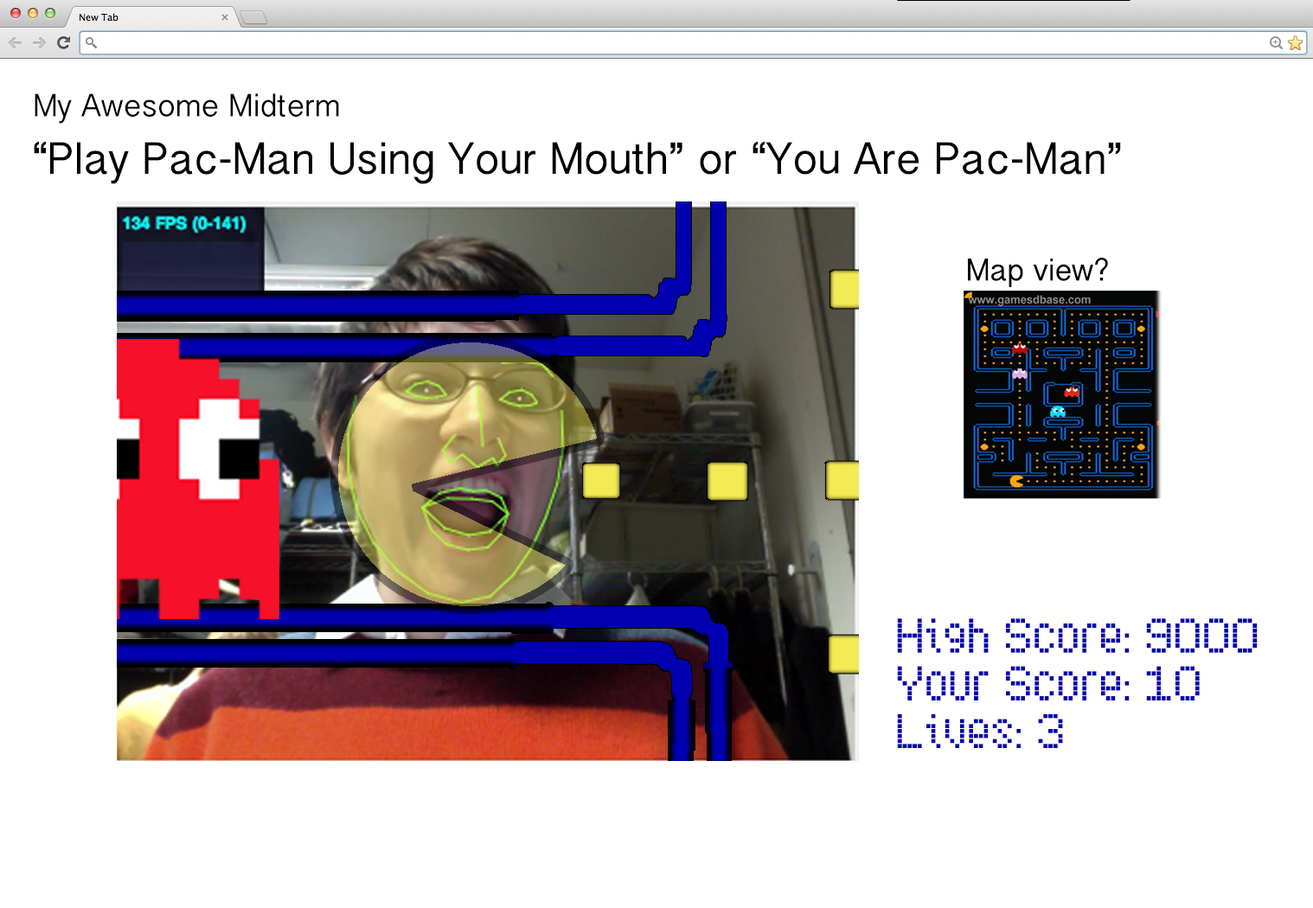
<style>
.page{position:relative;width:1313px;height:908px;background:#ffffff}
.page>*{position:absolute;margin:0}
.t1{font:28.5px "BanglaSangamMN";color:#000000}
.t2{font:39.8px "BanglaSangamMN";color:#000000}
.t3{font:27.7px "BanglaSangamMN";color:#000000}
.t4{font:39.8px "SubwayTicker";color:#0000b1}
</style>
<div class="page">
<p class="t1" style="left:35px;top:93px;width:304px;height:31px">My Awesome Midterm</p>
<p class="t2" style="left:34px;top:141px;width:1087px;height:43px">“Play Pac-Man Using Your Mouth” or “You Are Pac-Man”</p>
<p class="t3" style="left:968px;top:258px;width:140px;height:29px">Map view?</p>
<p class="t4" style="left:897px;top:618px;width:361px;height:130px">High Score: 9000<br>Your Score: 10<br>Lives: 3</p>
</div>
